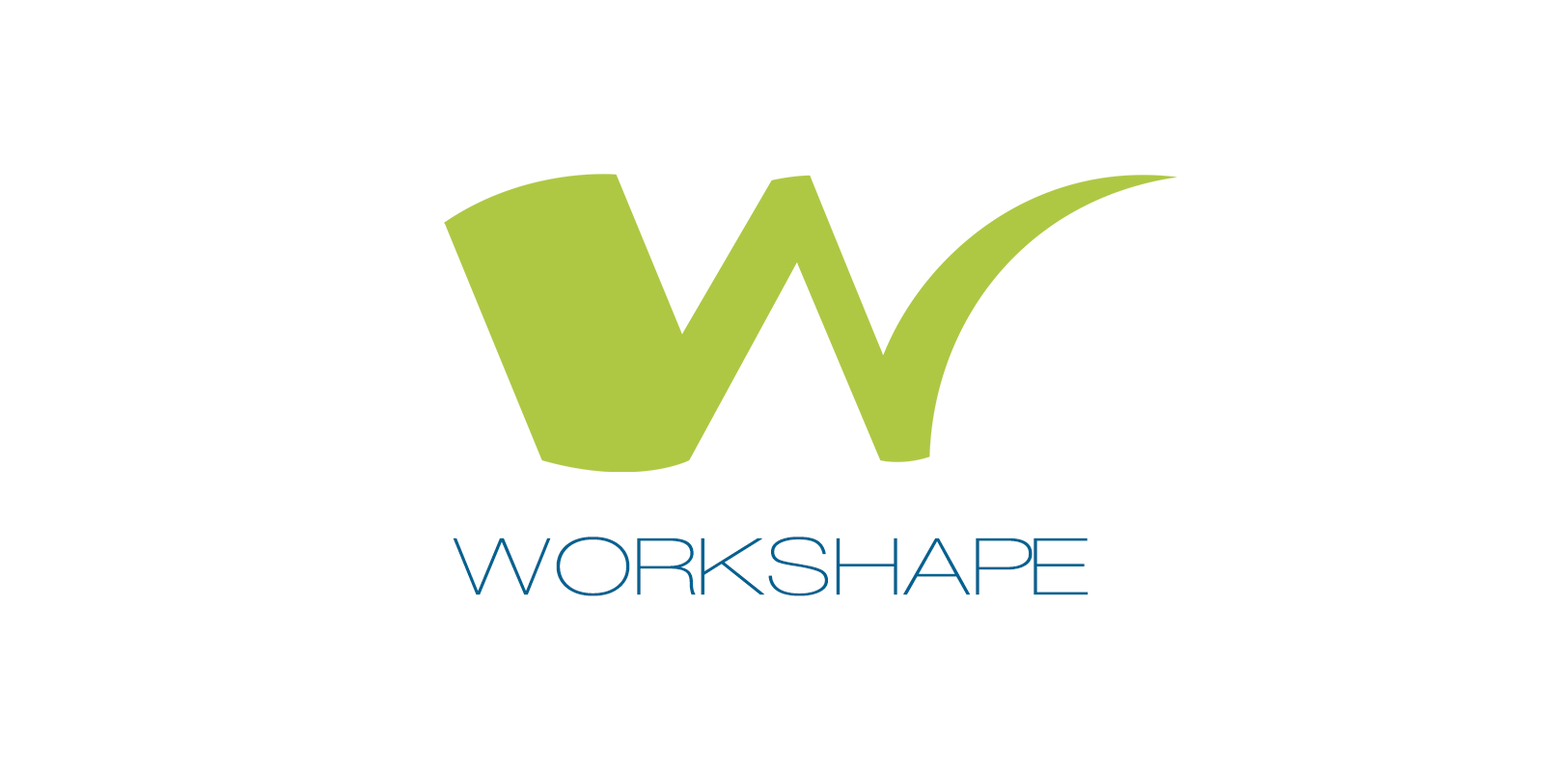
<style>
.page{position:relative;width:1544px;height:772px;background:#ffffff}
.page>*{position:absolute;margin:0}
.t1{font:92.5px "DISCO";letter-spacing:-0.19em;color:#006291;font-weight:bold;scale:1.04 1}
</style>
<div class="page">
<p class="t1" style="left:453px;top:537px;width:636px;height:59px">WORKSHAPE</p>
</div>
